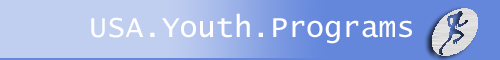
<style>
.page{position:relative;width:500px;height:60px;background:#c0cef0}
.page>*{position:absolute;margin:0}
.t1{font:30px "LucidaConsole";color:#ffffff}
</style>
<div class="page">
<p class="t1" style="left:91px;top:13px;width:321px;height:31px">USA.Youth.Programs</p>
</div>
